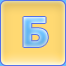
<style>
.page{position:relative;width:66px;height:66px}
.page>*{position:absolute;margin:0}
.t1{font:41px "Tahoma-Bold"}
</style>
<div class="page">
<p class="t1" style="left:23px;top:17px;width:25px;height:30px">Б</p>
<p class="t1" style="left:23px;top:17px;width:25px;height:30px">Б</p>
</div>
